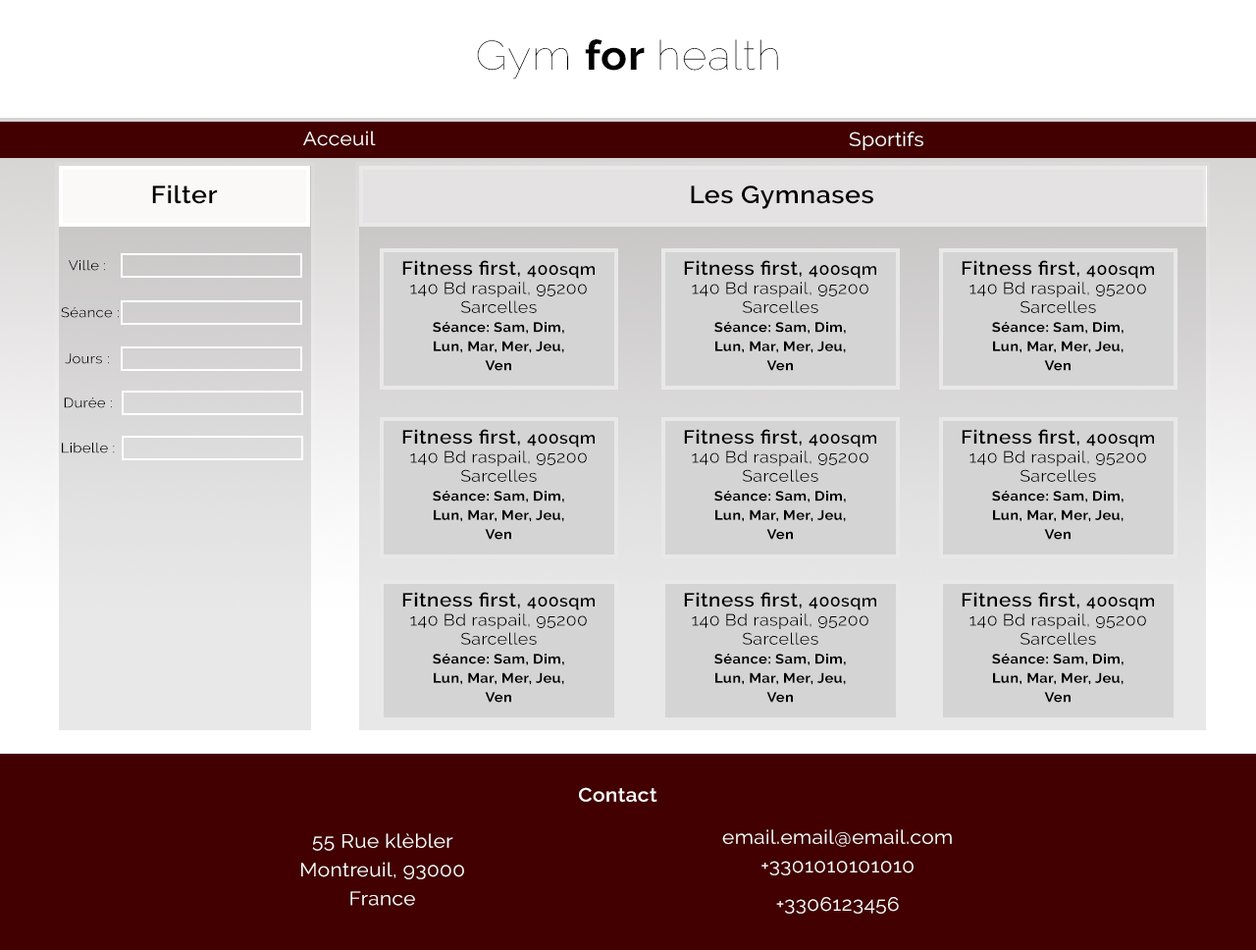
<style>
.page{position:relative;width:1256px;height:950px;background:#420000}
.page>*{position:absolute;margin:0}
.t1{font:40.9px "Raleway-Thin";letter-spacing:0.02em;color:#000000;scale:1.07 1}
.t2{font:40.9px "Raleway-Bold";letter-spacing:0.02em;color:#000000;scale:1.07 1}
.t3{font:19.1px "Raleway-Regular";letter-spacing:0.02em;color:#fcfcfc;scale:1.07 1}
.t4{font:19.1px "Raleway-Regular";letter-spacing:0.02em;color:#fefefe;scale:1.07 1}
.t5{font:24.5px "Raleway-SemiBold";letter-spacing:0.02em;color:#010000;scale:1.07 1}
.t6{font:13.6px "Raleway-Regular";letter-spacing:0.02em;color:#000000;scale:1.07 1}
.t7{font:13.6px/9.5px "Raleway-Bold";letter-spacing:0.02em;color:#000000;scale:1.07 1}
.t8{font:19.1px/9.5px "Raleway-SemiBold";letter-spacing:0.02em;color:#000000;scale:1.07 1}
.t9{font:16.4px/9.5px "Raleway-SemiBold";letter-spacing:0.02em;color:#000000;scale:1.07 1}
.t10{font:16.4px/9.5px "Raleway-Regular";letter-spacing:0.02em;color:#000000;scale:1.07 1}
.t11{font:19.1px "Raleway-SemiBold";letter-spacing:0.02em;color:#fdfafa;scale:1.07 1}
.t12{font:19.1px/9.5px "Raleway-Regular";letter-spacing:0.02em;color:#fdfafa;scale:1.07 1}
</style>
<div class="page">
<p class="t1" style="left:477px;top:39px;width:301px;height:40px">Gym <span class="t2">for </span>health</p>
<p class="t3" style="left:303px;top:130px;width:73px;height:16px">Acceuil</p>
<p class="t4" style="left:849px;top:131px;width:74px;height:19px">Sportifs</p>
<p class="t5" style="left:152px;top:184px;width:66px;height:20px">Filter</p>
<p class="t5" style="left:691px;top:185px;width:182px;height:24px">Les Gymnases</p>
<p class="t6" style="left:69px;top:260px;width:36px;height:11px">Ville :</p>
<p class="t7" style="left:402px;top:260px;width:192px;height:111px;text-align:center"><span class="t8">Fitness first, </span><span class="t9">400sqm<br><br></span><span class="t10">140 Bd raspail, 95200<br><br>Sarcelles<br></span><br>Séance: Sam, Dim,<br><br>Lun, Mar, Mer, Jeu,<br><br>Ven</p>
<p class="t7" style="left:684px;top:260px;width:192px;height:111px;text-align:center"><span class="t8">Fitness first, </span><span class="t9">400sqm<br><br></span><span class="t10">140 Bd raspail, 95200<br><br>Sarcelles<br></span><br>Séance: Sam, Dim,<br><br>Lun, Mar, Mer, Jeu,<br><br>Ven</p>
<p class="t7" style="left:961px;top:260px;width:193px;height:111px;text-align:center"><span class="t8">Fitness first, </span><span class="t9">400sqm<br><br></span><span class="t10">140 Bd raspail, 95200<br><br>Sarcelles<br></span><br>Séance: Sam, Dim,<br><br>Lun, Mar, Mer, Jeu,<br><br>Ven</p>
<p class="t6" style="left:61px;top:307px;width:58px;height:11px">Séance :</p>
<p class="t6" style="left:65px;top:353px;width:44px;height:11px">Jours :</p>
<p class="t6" style="left:64px;top:397px;width:48px;height:11px">Durée :</p>
<p class="t7" style="left:402px;top:429px;width:192px;height:111px;text-align:center"><span class="t8">Fitness first, </span><span class="t9">400sqm<br><br></span><span class="t10">140 Bd raspail, 95200<br><br>Sarcelles<br></span><br>Séance: Sam, Dim,<br><br>Lun, Mar, Mer, Jeu,<br><br>Ven</p>
<p class="t7" style="left:684px;top:429px;width:192px;height:111px;text-align:center"><span class="t8">Fitness first, </span><span class="t9">400sqm<br><br></span><span class="t10">140 Bd raspail, 95200<br><br>Sarcelles<br></span><br>Séance: Sam, Dim,<br><br>Lun, Mar, Mer, Jeu,<br><br>Ven</p>
<p class="t7" style="left:961px;top:429px;width:193px;height:111px;text-align:center"><span class="t8">Fitness first, </span><span class="t9">400sqm<br><br></span><span class="t10">140 Bd raspail, 95200<br><br>Sarcelles<br></span><br>Séance: Sam, Dim,<br><br>Lun, Mar, Mer, Jeu,<br><br>Ven</p>
<p class="t6" style="left:62px;top:442px;width:53px;height:11px">Libelle :</p>
<p class="t7" style="left:402px;top:592px;width:192px;height:110px;text-align:center"><span class="t8">Fitness first, </span><span class="t9">400sqm<br><br></span><span class="t10">140 Bd raspail, 95200<br><br>Sarcelles<br></span><br>Séance: Sam, Dim,<br><br>Lun, Mar, Mer, Jeu,<br><br>Ven</p>
<p class="t7" style="left:684px;top:592px;width:192px;height:110px;text-align:center"><span class="t8">Fitness first, </span><span class="t9">400sqm<br><br></span><span class="t10">140 Bd raspail, 95200<br><br>Sarcelles<br></span><br>Séance: Sam, Dim,<br><br>Lun, Mar, Mer, Jeu,<br><br>Ven</p>
<p class="t7" style="left:961px;top:592px;width:193px;height:110px;text-align:center"><span class="t8">Fitness first, </span><span class="t9">400sqm<br><br></span><span class="t10">140 Bd raspail, 95200<br><br>Sarcelles<br></span><br>Séance: Sam, Dim,<br><br>Lun, Mar, Mer, Jeu,<br><br>Ven</p>
<p class="t11" style="left:579px;top:787px;width:78px;height:14px">Contact</p>
<p class="t12" style="left:301px;top:833px;width:163px;height:72px;text-align:center">55 Rue klèbler<br><br><br>Montreuil, 93000<br><br><br>France</p>
<p class="t12" style="left:722px;top:829px;width:230px;height:84px;text-align:center">email.email@email.com<br><br><br>+3301010101010<br><br><br><br>+3306123456</p>
</div>
